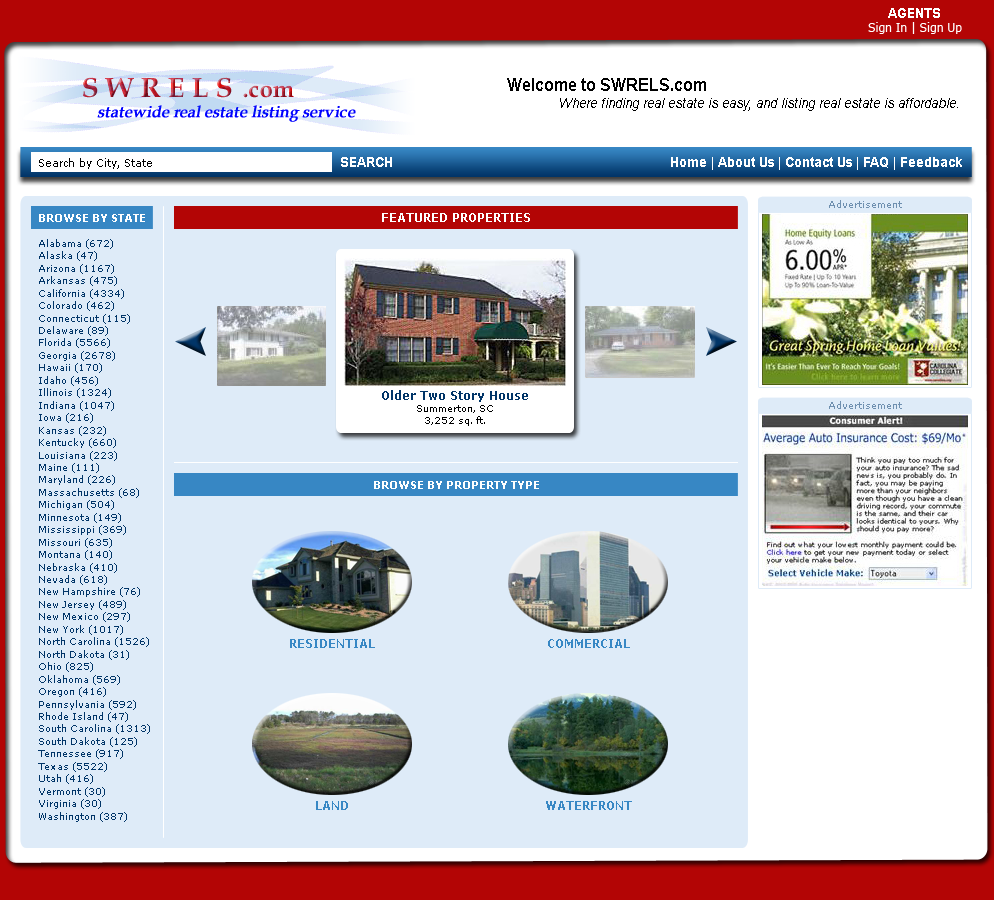
<style>
.page{position:relative;width:994px;height:900px;background:#deebf8}
.page>*{position:absolute;margin:0}
.t1{font:14px "Arial-BoldMT";color:#ffffff;scale:0.9 1}
.t2{font:12px "Verdana";color:#ffffff;scale:0.9 1}
.t3{font:14px "Arial-ItalicMT";color:#000000;scale:0.9 1}
.t4{font:18px "Arial-BoldMT";color:#000000;scale:0.9 1}
.t5{font:11px "Verdana";color:#000000;scale:0.9 1}
.t6{font:11px "Verdana-Bold";color:#ffffff;scale:0.9 1}
.t7{font:12px "Verdana-Bold";color:#ffffff;scale:0.9 1}
.t8{font:10.4px "Verdana";color:#013568;scale:0.87 1}
.t9{font:12px "Verdana-Bold";color:#3787c4;scale:0.9 1}
</style>
<div class="page">
<p class="t1" style="left:888px;top:8px;width:52px;height:10px">AGENTS</p>
<p class="t2" style="left:868px;top:22px;width:94px;height:12px">Sign In | Sign Up</p>
<p class="t3" style="left:507px;top:78px;width:451px;height:33px"><span class="t4">Welcome to SWRELS.com<br>             </span>Where finding real estate is easy, and listing real estate is affordable.</p>
<p class="t5" style="left:39px;top:158px;width:113px;height:11px">Search by City, State<br>.</p>
<p class="t1" style="left:341px;top:157px;width:51px;height:10px">SEARCH</p>
<p class="t1" style="left:671px;top:157px;width:291px;height:13px">Home | About Us | Contact Us | FAQ | Feedback</p>
<p class="t6" style="left:39px;top:214px;width:106px;height:8px">BROWSE BY STATE</p>
<p class="t7" style="left:382px;top:213px;width:148px;height:9px">FEATURED PROPERTIES</p>
<p class="t8" style="left:38px;top:239px;width:112px;height:583px">Alabama (672)<br>Alaska (47)<br>Arizona (1167)<br>Arkansas (475)<br>California (4334)<br>Colorado (462)<br>Connecticut (115)<br>Delaware (89)<br>Florida (5566)<br>Georgia (2678)<br>Hawaii (170)<br>Idaho (456)<br>Illinois (1324)<br>Indiana (1047)<br>Iowa (216)<br>Kansas (232)<br>Kentucky (660)<br>Louisiana (223)<br>Maine (111)<br>Maryland (226)<br>Massachusetts (68)<br>Michigan (504)<br>Minnesota (149)<br>Mississippi (369)<br>Missouri (635)<br>Montana (140)<br>Nebraska (410)<br>Nevada (618)<br>New Hampshire (76)<br>New Jersey (489)<br>New Mexico (297)<br>New York (1017)<br>North Carolina (1526)<br>North Dakota (31)<br>Ohio (825)<br>Oklahoma (569)<br>Oregon (416)<br>Pennsylvania (592)<br>Rhode Island (47)<br>South Carolina (1313)<br>South Dakota (125)<br>Tennessee (917)<br>Texas (5522)<br>Utah (416)<br>Vermont (30)<br>Virginia (30)<br>Washington (387)<br>West Virginia (259)<br>Wisconsin (500)<br>Wyoming (83)</p>
<p class="t6" style="left:374px;top:481px;width:165px;height:8px">BROWSE BY PROPERTY TYPE</p>
<p class="t9" style="left:290px;top:639px;width:85px;height:9px">RESIDENTIAL</p>
<p class="t9" style="left:548px;top:639px;width:82px;height:9px">COMMERCIAL</p>
<p class="t9" style="left:316px;top:801px;width:32px;height:9px">LAND</p>
<p class="t9" style="left:546px;top:801px;width:86px;height:9px">WATERFRONT</p>
</div>
